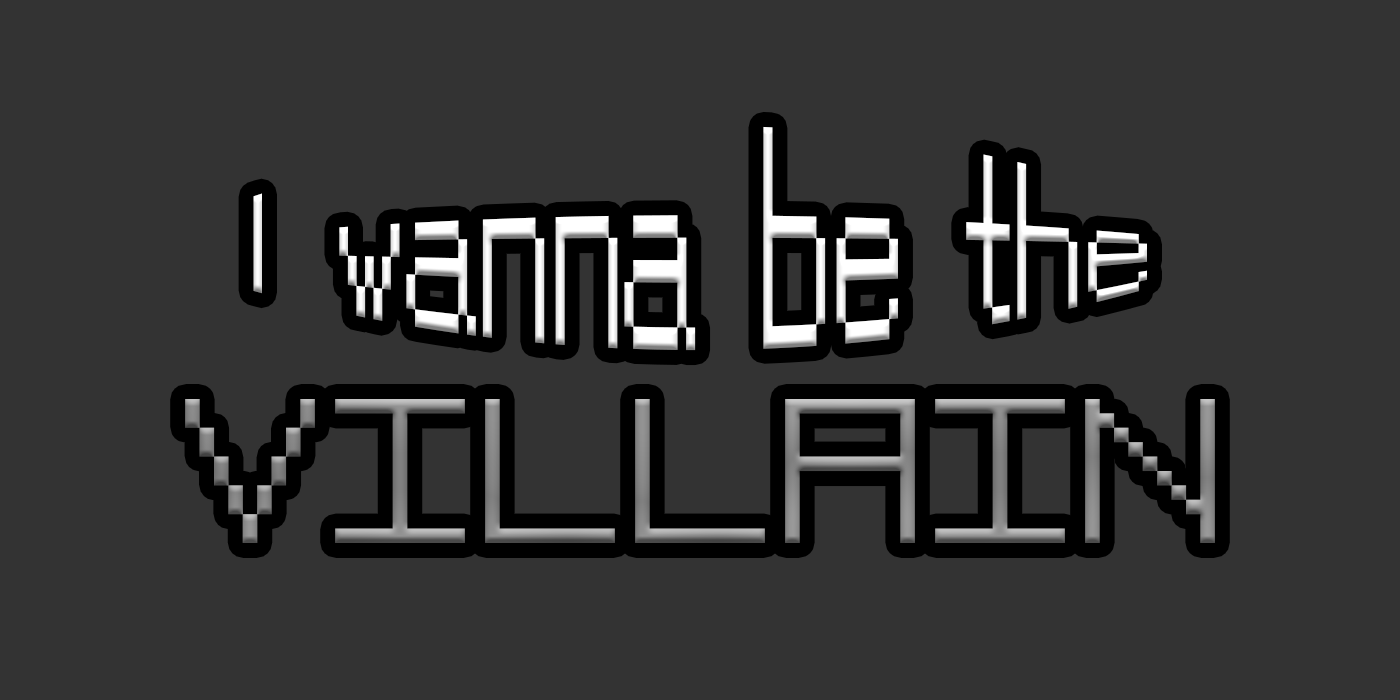
<style>
.page{position:relative;width:1400px;height:700px;background:#333333}
.page>*{position:absolute;margin:0}
.t1{font:120px/160px "PFStardust";color:#ffffff}
.t2{font:200px "PFStardust"}
</style>
<div class="page">
<p class="t1" style="left:253px;top:126px;width:894px;height:225px;text-align:center">l wanna be the</p>
<p class="t2" style="left:185px;top:399px;width:1030px;height:144px">VILLAIN</p>
</div>
